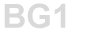
<style>
.page{position:relative;width:100px;height:34px;background:#ffffff}
.page>*{position:absolute;margin:0}
.t1{font:33.3px "Arial-BoldMT";color:#d9d9d9}
</style>
<div class="page">
<p class="t1" style="left:4px;top:3px;width:62px;height:26px">BG1</p>
</div>
